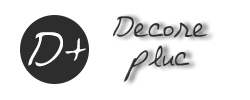
<style>
.page{position:relative;width:250px;height:100px;background:#ffffff}
.page>*{position:absolute;margin:0}
.t1{font:24px "Avantque...";color:#2d2d2d}
.t2{font:40px "Avantque...";color:#ffffff}
</style>
<div class="page">
<p class="t1" style="left:112px;top:16px;width:96px;height:66px;text-align:center">Decore pluc</p>
<p class="t2" style="left:28px;top:32px;width:58px;height:35px">D+</p>
</div>
